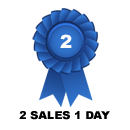
<style>
.page{position:relative;width:130px;height:130px;background:#ffffff}
.page>*{position:absolute;margin:0}
.t1{font:18px "Arial-Black";color:#ffffff}
.t2{font:10.7px "Arial-Black";color:#000000;scale:1.04 1}
</style>
<div class="page">
<p class="t1" style="left:60px;top:34px;width:12px;height:14px">2</p>
<p class="t2" style="left:19px;top:111px;width:91px;height:9px">2 SALES 1 DAY</p>
</div>
